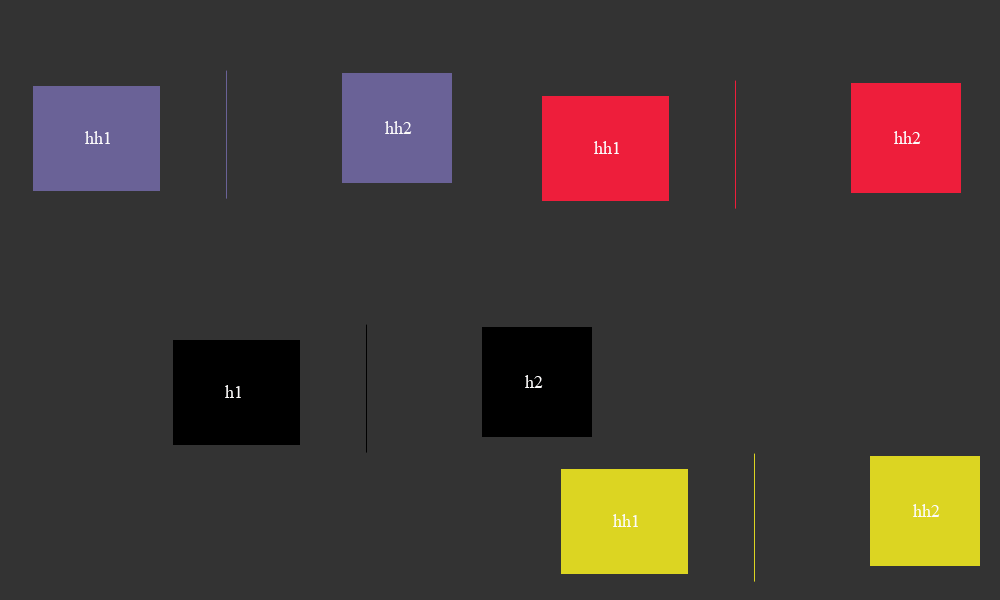
<style>
.page{position:relative;width:1000px;height:600px;background:#333333}
.page>*{position:absolute;margin:0}
.t1{font:18px "IskoolaPota";color:#fcfbfb}
</style>
<div class="page">
<p class="t1" style="left:385px;top:121px;width:27px;height:13px">hh2</p>
<p class="t1" style="left:85px;top:131px;width:25px;height:13px">hh1</p>
<p class="t1" style="left:894px;top:131px;width:27px;height:13px">hh2</p>
<p class="t1" style="left:594px;top:141px;width:25px;height:13px">hh1</p>
<p class="t1" style="left:525px;top:375px;width:18px;height:13px">h2</p>
<p class="t1" style="left:225px;top:385px;width:16px;height:13px">h1</p>
<p class="t1" style="left:913px;top:504px;width:27px;height:13px">hh2</p>
<p class="t1" style="left:613px;top:514px;width:25px;height:13px">hh1</p>
</div>
